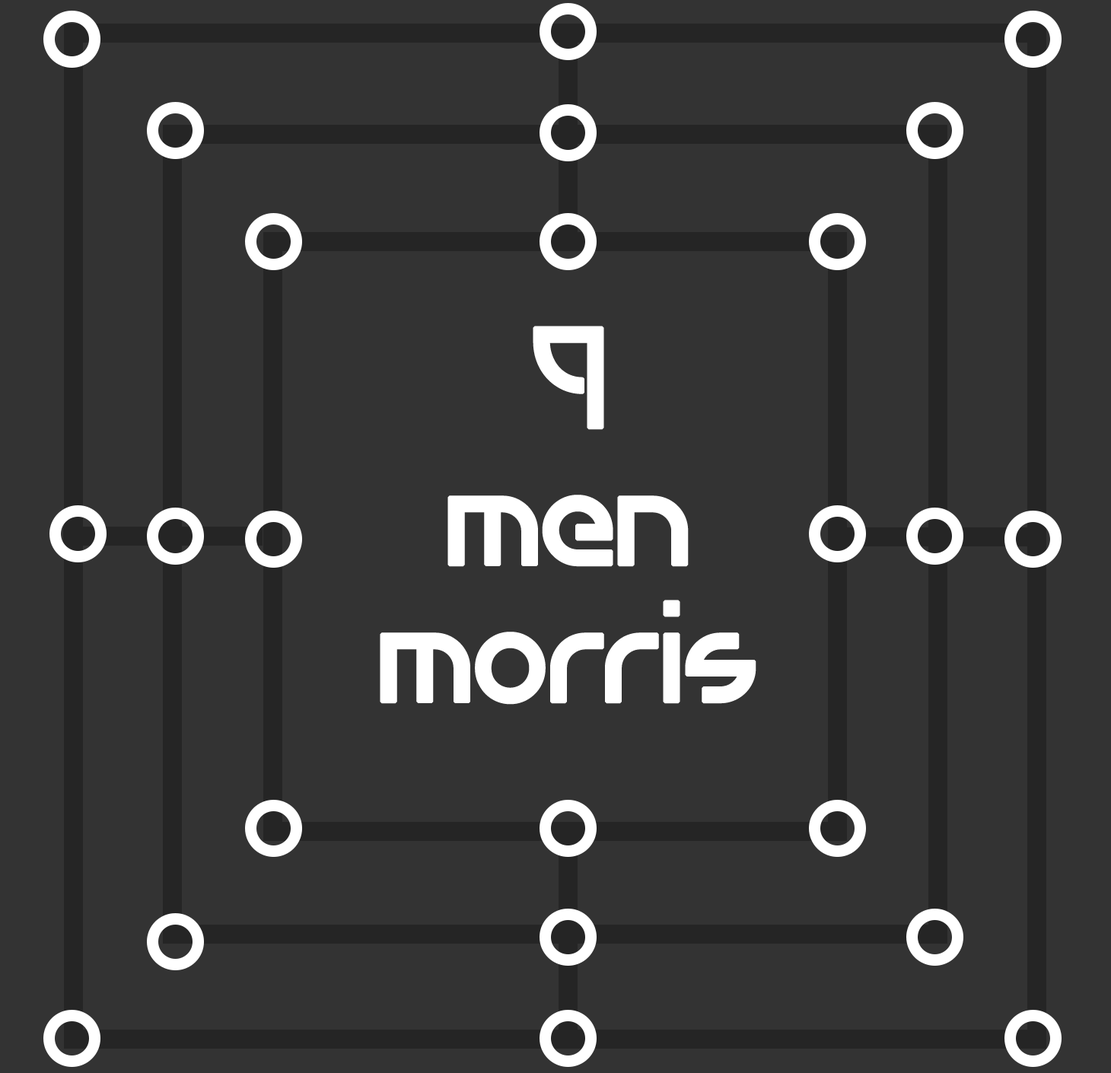
<style>
.page{position:relative;width:1111px;height:1073px;background:#333333}
.page>*{position:absolute;margin:0}
.t1{font:114.2px "Atiba-Regular";color:#ffffff;font-weight:bold}
</style>
<div class="page">
<p class="t1" style="left:380px;top:326px;width:377px;height:379px;text-align:center">9<br>men<br>morris</p>
</div>
